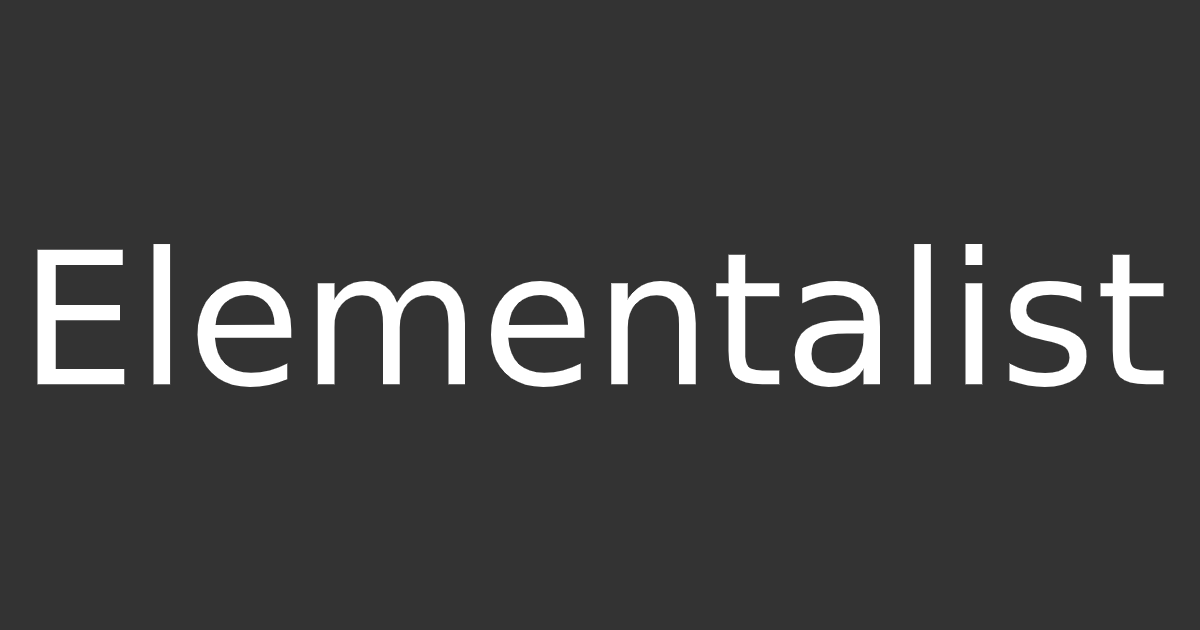
<style>
.page{position:relative;width:1200px;height:630px;background:#333333}
.page>*{position:absolute;margin:0}
.t1{font:184.6px "DejaVuSans";color:#ffffff}
</style>
<div class="page">
<p class="t1" style="left:37px;top:244px;width:1127px;height:143px">Elementalist</p>
</div>
